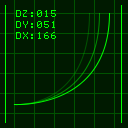
<style>
.page{position:relative;width:128px;height:128px;background:#001a00}
.page>*{position:absolute;margin:0}
.t1{font:9px "Terminal";letter-spacing:0.1em;color:#00ff00}
</style>
<div class="page">
<p class="t1" style="left:16px;top:10px;width:40px;height:29px">DZ:015<br>DY:051<br>DX:166</p>
</div>
